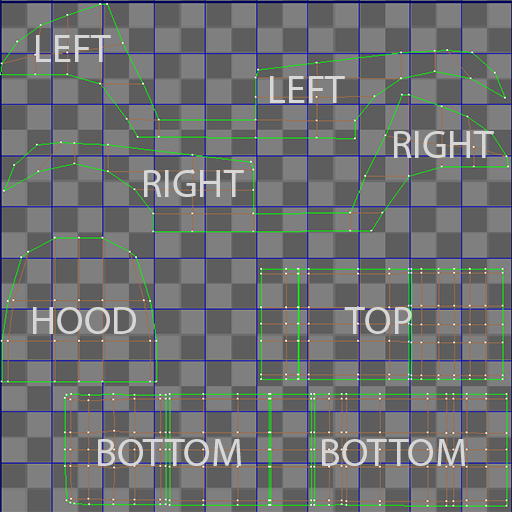
<style>
.page{position:relative;width:512px;height:512px;background:#7f7f7f}
.page>*{position:absolute;margin:0}
.t1{font:40px "MyriadPro-Regular";color:#d7d7d7}
</style>
<div class="page">
<p class="t1" style="left:36px;top:35px;width:75px;height:27px">LEFT</p>
<p class="t1" style="left:270px;top:76px;width:75px;height:27px">LEFT</p>
<p class="t1" style="left:394px;top:131px;width:100px;height:27px">RIGHT</p>
<p class="t1" style="left:144px;top:170px;width:100px;height:27px">RIGHT</p>
<p class="t1" style="left:33px;top:307px;width:103px;height:27px">HOOD</p>
<p class="t1" style="left:344px;top:307px;width:68px;height:27px">TOP</p>
<p class="t1" style="left:98px;top:439px;width:143px;height:27px">BOTTOM</p>
<p class="t1" style="left:322px;top:439px;width:143px;height:27px">BOTTOM</p>
</div>
